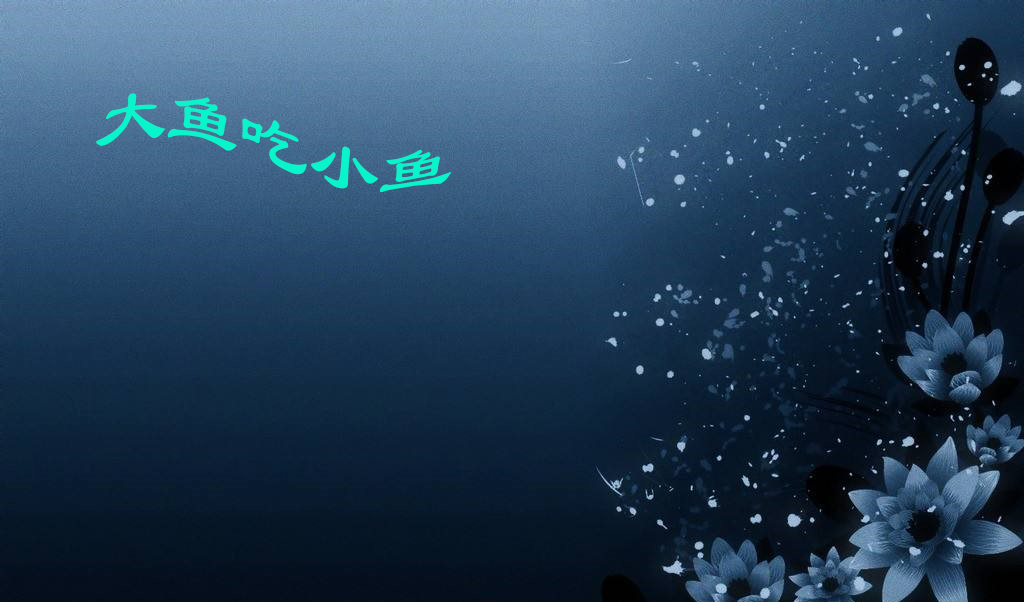
<style>
.page{position:relative;width:1024px;height:602px}
.page>*{position:absolute;margin:0}
.t1{font:72px "LiSu";color:#0af4cb}
</style>
<div class="page">
<p class="t1" style="left:96px;top:93px;width:356px;height:100px;rotate:5deg">大鱼吃小鱼</p>
</div>
